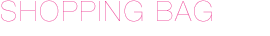
<style>
.page{position:relative;width:270px;height:36px;background:#ffffff}
.page>*{position:absolute;margin:0}
.t1{font:28px "HelveticaNeueLTPro-UltLt";letter-spacing:0.075em}
</style>
<div class="page">
<p class="t1" style="left:1px;top:0px;width:211px;height:22px">SHOPPING BAG</p>
</div>
